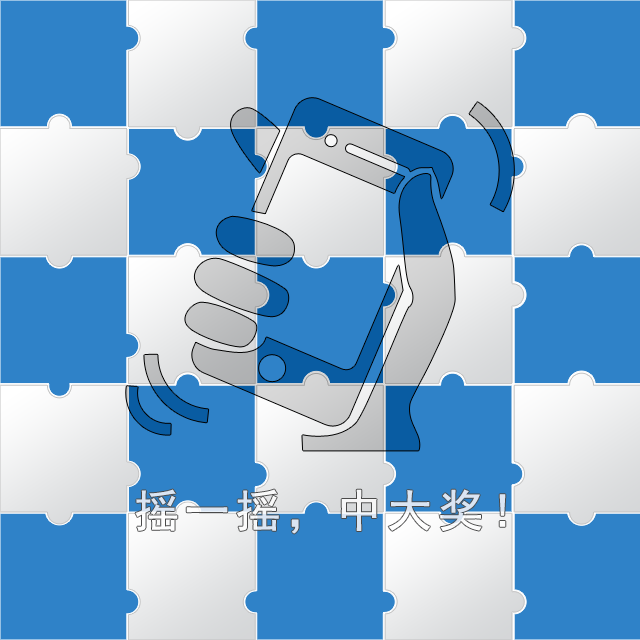
<style>
.page{position:relative;width:640px;height:640px;background:#2f82c8}
.page>*{position:absolute;margin:0}
.t1{font:45px "SimHei";letter-spacing:0.1em;font-weight:bold}
</style>
<div class="page">
<p class="t1" style="left:135px;top:489px;width:371px;height:45px">摇一摇，中大奖！</p>
</div>
